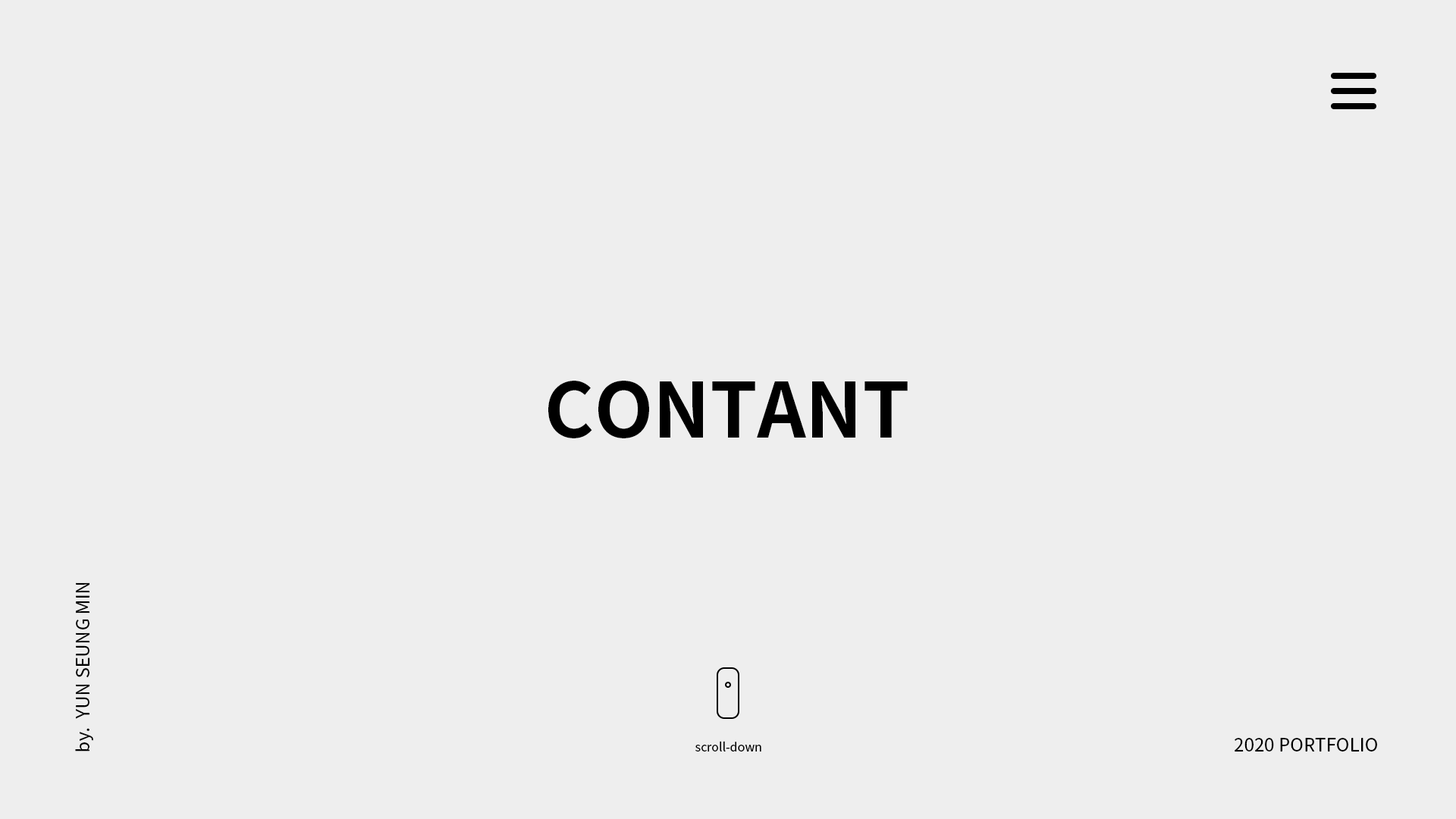
<style>
.page{position:relative;width:1456px;height:819px;background:#eeeeee}
.page>*{position:absolute;margin:0}
.t1{font:75.8px "NotoSansKR-Bold";color:#000000}
.t2{font:18.2px "NotoSansKR-Regular";color:#000000}
.t3{font:12.1px "NotoSansKR-Regular";letter-spacing:-0.001em;color:#000000}
</style>
<div class="page">
<p class="t1" style="left:548px;top:381px;width:360px;height:57px">CONTANT</p>
<p class="t2" style="left:75px;top:582px;width:18px;height:169px;rotate:-90deg">by.  YUN SEUNG MIN</p>
<p class="t2" style="left:1235px;top:738px;width:142px;height:13px">2020 PORTFOLIO</p>
<p class="t3" style="left:695px;top:741px;width:66px;height:10px">scroll-down</p>
</div>
